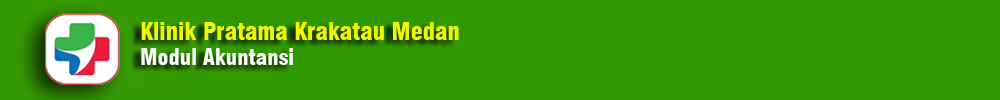
<style>
.page{position:relative;width:1000px;height:100px;background:#339900}
.page>*{position:absolute;margin:0}
.t1{font:24px "Swiss721BT-BlackCondensed";color:#f3f603}
.t2{font:22px "Swiss721BT-BlackCondensed";color:#fafaf9}
</style>
<div class="page">
<p class="t1" style="left:141px;top:22px;width:318px;height:18px">Klinik Pratama Krakatau Medan</p>
<p class="t2" style="left:141px;top:48px;width:152px;height:17px">Modul Akuntansi</p>
</div>
